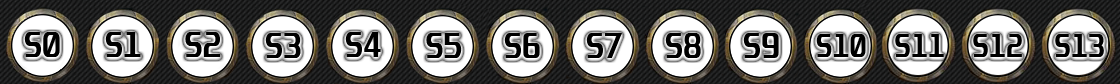
<style>
.page{position:relative;width:1120px;height:84px}
.page>*{position:absolute;margin:0}
.t1{font:30.7px "Unispace-Bold";color:#000000}
.t2{font:28px "Unispace-Bold";color:#000000}
</style>
<div class="page">
<p class="t1" style="left:24px;top:32px;width:36px;height:25px">S0</p>
<p class="t1" style="left:105px;top:32px;width:36px;height:25px">S1</p>
<p class="t1" style="left:185px;top:32px;width:36px;height:25px">S2</p>
<p class="t1" style="left:265px;top:33px;width:36px;height:25px">S3</p>
<p class="t1" style="left:345px;top:32px;width:36px;height:25px">S4</p>
<p class="t1" style="left:426px;top:33px;width:36px;height:25px">S5</p>
<p class="t1" style="left:504px;top:33px;width:36px;height:25px">S6</p>
<p class="t1" style="left:586px;top:33px;width:36px;height:25px">S7</p>
<p class="t1" style="left:665px;top:33px;width:36px;height:25px">S8</p>
<p class="t1" style="left:743px;top:33px;width:36px;height:25px">S9</p>
<p class="t2" style="left:816px;top:34px;width:50px;height:23px">S10</p>
<p class="t2" style="left:895px;top:34px;width:49px;height:23px">S11</p>
<p class="t2" style="left:973px;top:34px;width:49px;height:23px">S12</p>
<p class="t2" style="left:1055px;top:34px;width:49px;height:23px">S13</p>
</div>
